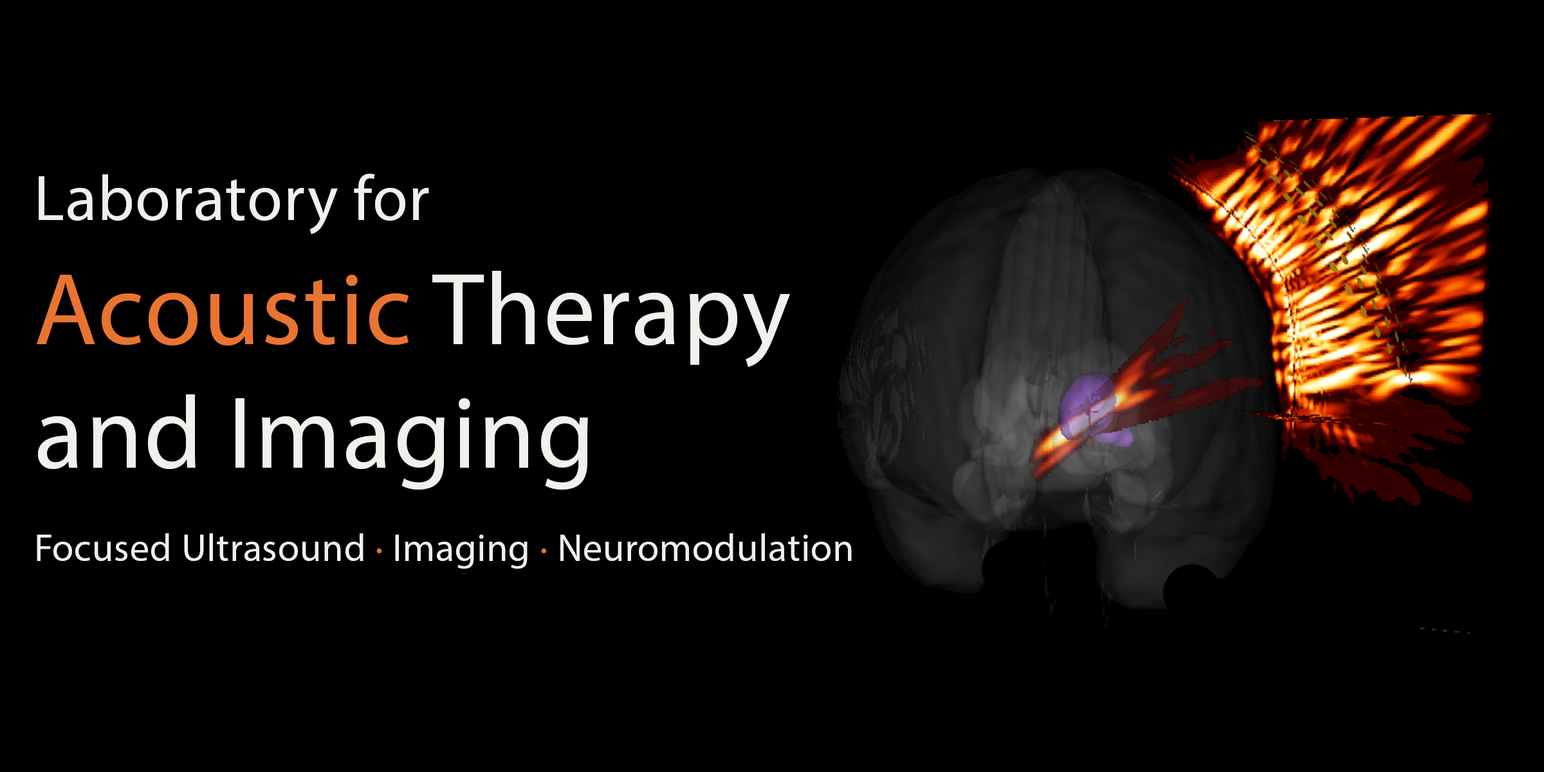
<style>
.page{position:relative;width:1544px;height:772px;background:#000000}
.page>*{position:absolute;margin:0}
.t1{font:103.3px "MyriadPro-Regular";letter-spacing:0.015em;color:#f2f0ec}
.t2{font:64.5px "MyriadPro-Regular";letter-spacing:0.015em;color:#f2f0ec}
.t3{font:103.3px "MyriadPro-Regular";letter-spacing:0.015em;color:#e97432}
.t4{font:38.7px "MyriadPro-Regular";letter-spacing:0.015em;color:#f2f0ec}
.t5{font:38.7px "MyriadPro-Regular";letter-spacing:0.015em;color:#e97432}
</style>
<div class="page">
<p class="t1" style="left:37px;top:174px;width:815px;height:395px"><span class="t2">Laboratory for<br></span><span class="t3">Acoustic </span>Therapy <br>and Imaging<br><span class="t4"><br>Focused Ultrasound </span><span class="t5">·</span><span class="t4"> Imaging </span><span class="t5">·</span><span class="t4"> Neuromodulation</span></p>
</div>
